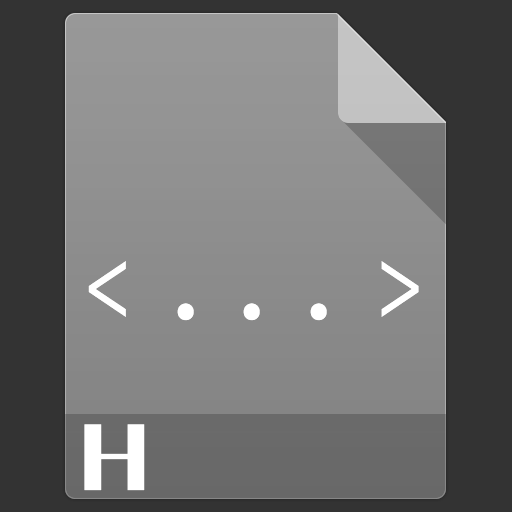
<style>
.page{position:relative;width:512px;height:512px;background:#333333}
.page>*{position:absolute;margin:0}
.t1{font:99px "SourceCodeProYaHeiHybrid";letter-spacing:0.07em;color:#ffffff}
.t2{font:99px "SourceCodePro-Regular";letter-spacing:0.07em;color:#ffffff}
.t3{font:72px "MFLiHei_Noncommercial-Regular";letter-spacing:0.07em;color:#ffffff}
</style>
<div class="page">
<p class="t1" style="left:88px;top:261px;width:331px;height:56px">&lt;    &gt;</p>
<p class="t2" style="left:177px;top:303px;width:150px;height:18px">...</p>
<p class="t3" style="left:84px;top:424px;width:61px;height:67px">H</p>
</div>
